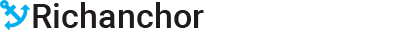
<style>
.page{position:relative;width:400px;height:30px;background:#ffffff}
.page>*{position:absolute;margin:0}
.t1{font:33.7px "Roboto-Medium";color:#1f1c1b}
</style>
<div class="page">
<p class="t1" style="left:33px;top:2px;width:171px;height:26px">Richanchor</p>
</div>
